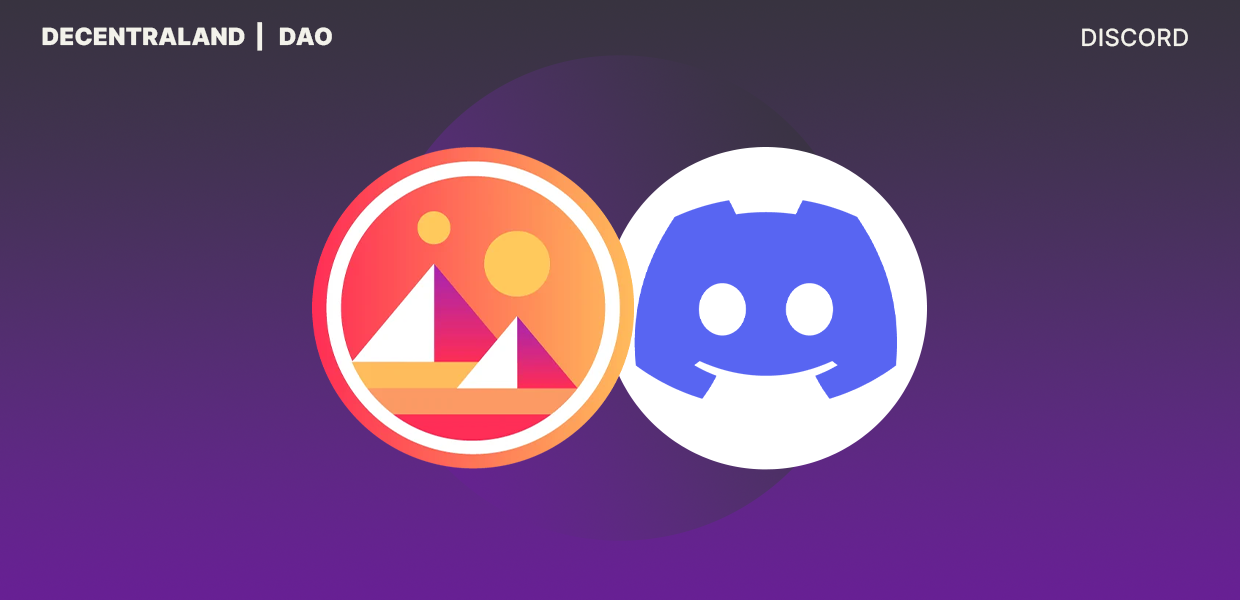
<style>
.page{position:relative;width:1240px;height:600px}
.page>*{position:absolute;margin:0}
.t1{font:23.8px "Inter-Black";color:#f3f2eb;text-transform:uppercase}
.t2{font:23.8px "Inter-Medium";color:#f3f2eb;text-transform:uppercase}
</style>
<div class="page">
<p class="t1" style="left:42px;top:22px;width:290px;height:29px">decentraland  |   DAO</p>
<p class="t2" style="left:1082px;top:28px;width:106px;height:19px">Discord</p>
</div>
